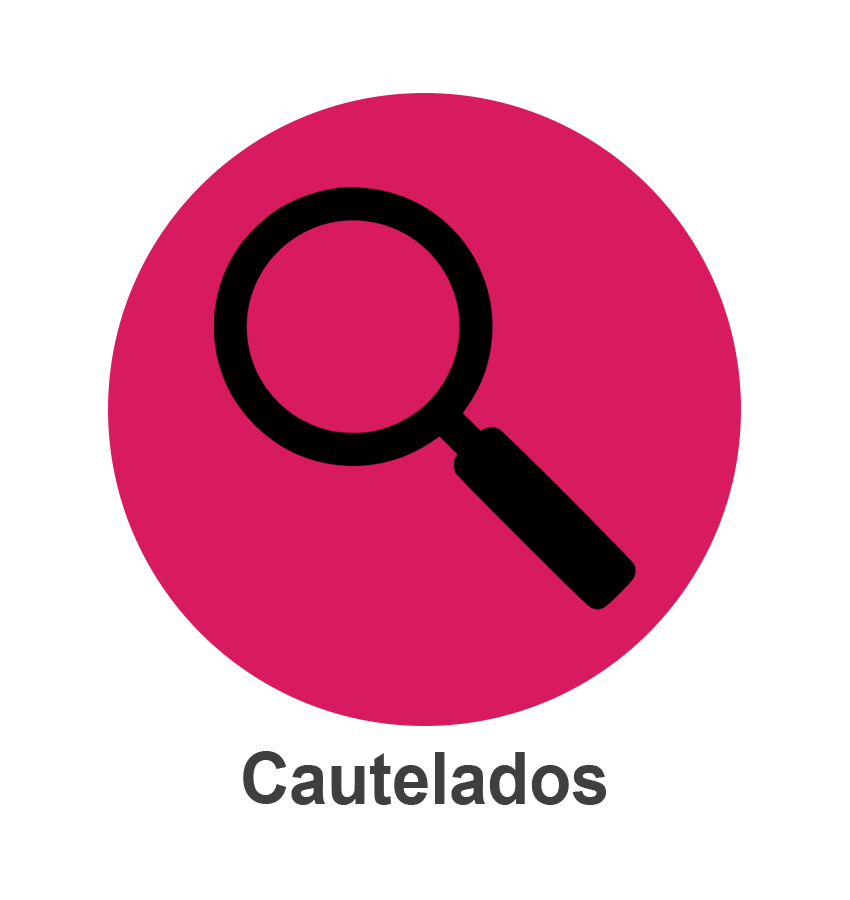
<style>
.page{position:relative;width:850px;height:900px;background:#ffffff}
.page>*{position:absolute;margin:0}
.t1{font:72.1px "Arial-BoldMT";color:#3f3f3f;scale:0.95 1}
</style>
<div class="page">
<p class="t1" style="left:243px;top:751px;width:363px;height:54px">Cautelados</p>
</div>
